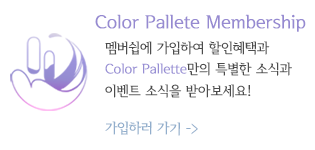
<style>
.page{position:relative;width:315px;height:150px;background:#ffffff}
.page>*{position:absolute;margin:0}
.t1{font:19px "SeoulHangangCB";letter-spacing:-0.01em;color:#968ad1;scale:1.1 1}
.t2{font:14px/21.3px "SeoulHangangCB";letter-spacing:-0.01em;color:#4c4c4c;scale:1.1 1}
.t3{font:14px/21.3px "SeoulHangangCB";letter-spacing:-0.01em;color:#978ed4;scale:1.1 1}
.t4{font:14px "SeoulHangangCB";letter-spacing:-0.01em;color:#92aecc;scale:1.1 1}
</style>
<div class="page">
<p class="t1" style="left:95px;top:14px;width:211px;height:18px">Color Pallete Membership</p>
<p class="t2" style="left:105px;top:41px;width:187px;height:57px">멤버쉽에 가입하여 할인혜택과<br><span class="t3">Color Pallette</span>만의 특별한 소식과 <br>이벤트 소식을 받아보세요!</p>
<p class="t4" style="left:105px;top:121px;width:93px;height:15px">가입하러 가기 -&gt;</p>
</div>
